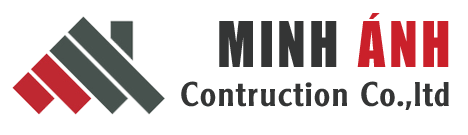
<style>
.page{position:relative;width:468px;height:135px;background:#ffffff}
.page>*{position:absolute;margin:0}
.t1{font:58.3px "UTM-Impact";letter-spacing:0.06em;color:#343535;scale:0.91 1}
.t2{font:58.3px "UTM-Impact";letter-spacing:0.06em;color:#ca202a;scale:0.91 1}
.t3{font:33.3px "UTM-Alexander";letter-spacing:0.05em;color:#343535;scale:0.91 1}
</style>
<div class="page">
<p class="t1" style="left:219px;top:13px;width:230px;height:54px">MINH<span class="t2"> ÁNH</span></p>
<p class="t3" style="left:181px;top:81px;width:268px;height:29px">Contruction Co.,ltd</p>
</div>
